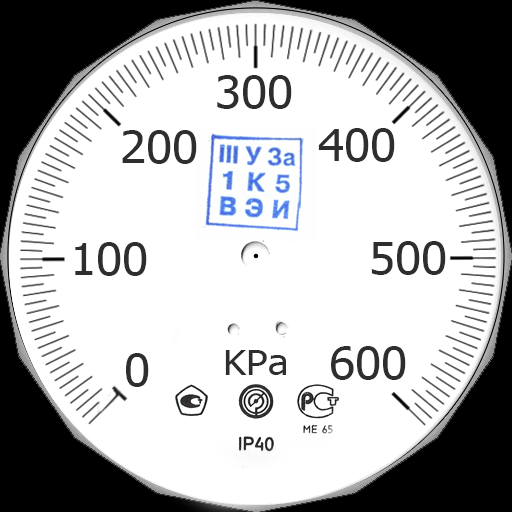
<style>
.page{position:relative;width:512px;height:512px;background:#ffffff}
.page>*{position:absolute;margin:0}
.t1{font:43.5px "Tahoma";color:#2e2e2e;scale:1.09 1}
.t2{font:35px "Tahoma";color:#2e2e2e;scale:1.12 1}
</style>
<div class="page">
<p class="t1" style="left:217px;top:75px;width:75px;height:34px">300</p>
<p class="t1" style="left:122px;top:130px;width:75px;height:34px">200</p>
<p class="t1" style="left:318px;top:128px;width:77px;height:34px">400</p>
<p class="t1" style="left:75px;top:242px;width:72px;height:34px">100</p>
<p class="t1" style="left:371px;top:241px;width:75px;height:34px">500</p>
<p class="t1" style="left:126px;top:353px;width:23px;height:34px">0</p>
<p class="t2" style="left:225px;top:350px;width:61px;height:25px">KPa</p>
<p class="t1" style="left:331px;top:346px;width:75px;height:34px">600</p>
</div>
